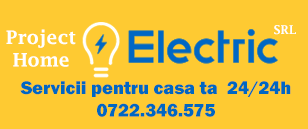
<style>
.page{position:relative;width:308px;height:129px;background:#feca32}
.page>*{position:absolute;margin:0}
.t1{font:18.7px "LucidaFax-Demi";color:#ffffff}
.t2{font:12px "LucidaFax-Demi";color:#ffffff}
.t3{font:18.7px "FranklinGothic-Heavy";color:#0067c2}
</style>
<div class="page">
<p class="t1" style="left:6px;top:29px;width:70px;height:38px;text-align:center">Project<br>Home</p>
<p class="t2" style="left:274px;top:25px;width:22px;height:10px">SRL</p>
<p class="t3" style="left:20px;top:81px;width:271px;height:36px;text-align:center">Servicii pentru casa ta  24/24h<br>0722.346.575</p>
</div>
